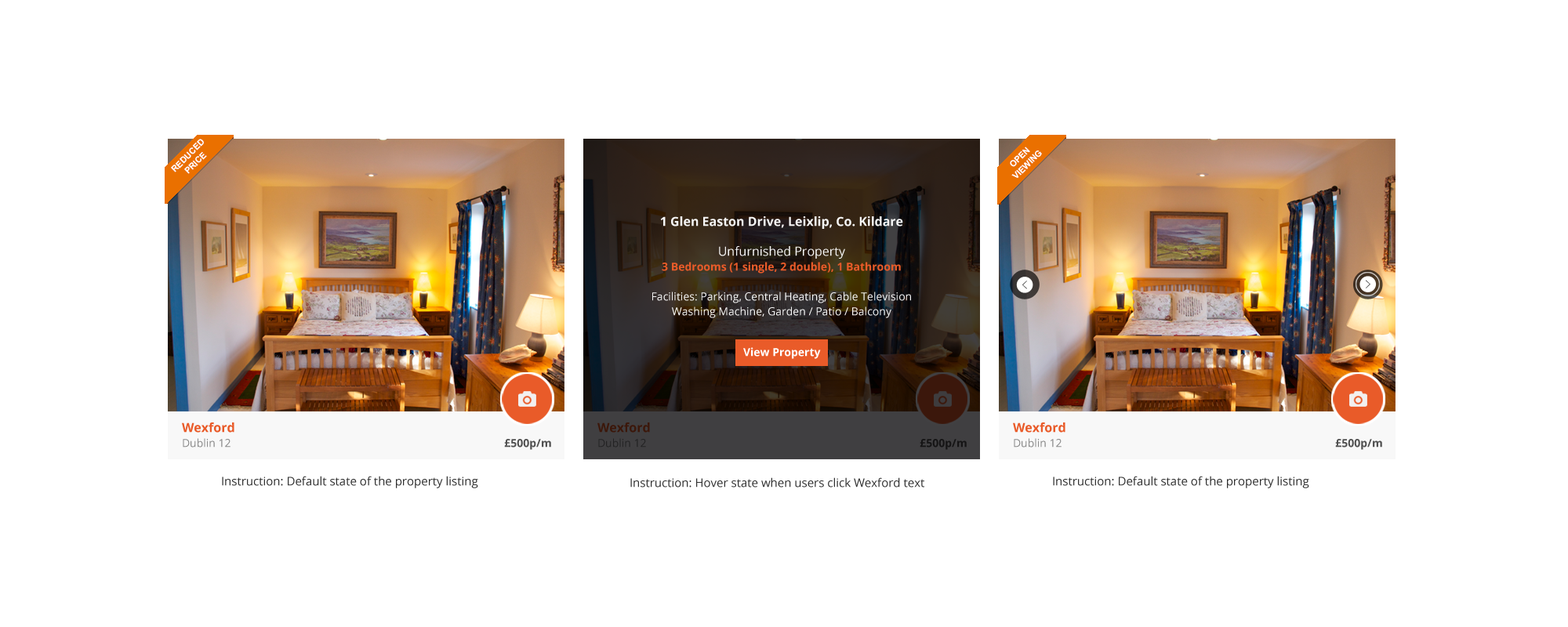
<style>
.page{position:relative;width:1568px;height:627px;background:#ffffff}
.page>*{position:absolute;margin:0}
.t1{font:11px/14.9px "OpenSans";color:#f7f7f7}
.t2{font:12.5px/14.9px "OpenSans-Bold";color:#f7f7f7}
.t3{font:12.5px/14.9px "OpenSans";color:#f7f7f7}
.t4{font:11px/14.9px "OpenSans-Bold";color:#e95b29}
.t5{font:11px "OpenSans-Bold";color:#ffffff}
.t6{font:11px/14.9px "OpenSans";color:#898989}
.t7{font:12.5px/14.9px "OpenSans-Bold";color:#e95a28}
.t8{font:11px/14.9px "OpenSans-Bold";color:#515151}
.t9{font:11px/14.9px "OpenSans"}
.t10{font:12.5px/14.9px "OpenSans-Bold"}
.t11{font:11px/14.9px "OpenSans-Bold"}
.t12{font:11.8px "OpenSans";color:#303030}
</style>
<div class="page">
<p class="t1" style="left:652px;top:216px;width:259px;height:102px;text-align:center"><span class="t2">1 Glen Easton Drive, Leixlip, Co. Kildare<br><br></span><span class="t3">Unfurnished Property<br></span><span class="t4">3 Bedrooms (1 single, 2 double), 1 Bathroom<br><br></span>Facilities: Parking, Central Heating, Cable Television<br>Washing Machine, Garden / Patio / Balcony</p>
<p class="t5" style="left:743px;top:347px;width:78px;height:12px">View Property</p>
<p class="t6" style="left:182px;top:423px;width:369px;height:27px"><span class="t7">Wexford<br></span>Dublin 12                                        <span class="t8">£500p/m</span></p>
<p class="t9" style="left:597px;top:423px;width:370px;height:27px"><span class="t10">Wexford<br></span>Dublin 12                                        <span class="t11">£500p/m</span></p>
<p class="t6" style="left:1013px;top:423px;width:369px;height:27px"><span class="t7">Wexford<br></span>Dublin 12                                        <span class="t8">£500p/m</span></p>
<p class="t12" style="left:222px;top:476px;width:256px;height:12px">Instruction: Default state of the property listing</p>
<p class="t12" style="left:630px;top:477px;width:294px;height:11px">Instruction: Hover state when users click Wexford text</p>
<p class="t12" style="left:1053px;top:476px;width:256px;height:12px">Instruction: Default state of the property listing</p>
</div>
